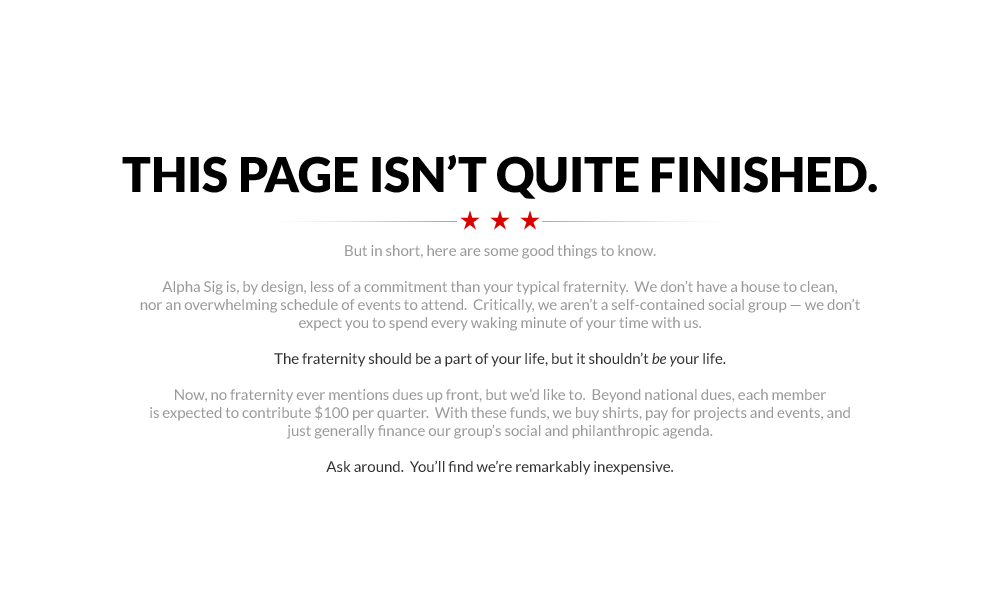
<style>
.page{position:relative;width:1000px;height:600px;background:#ffffff}
.page>*{position:absolute;margin:0}
.t1{font:15px/18px "Lato-Regular";color:#999999}
.t2{font:48px/36px "Lato-Black";color:#000000}
.t3{font:15px/18px "Lato-Regular";color:#333333}
.t4{font:15px/18px "Lato-Italic";color:#333333}
</style>
<div class="page">
<p class="t1" style="left:122px;top:154px;width:755px;height:321px;text-align:center"><span class="t2">THIS PAGE ISN’T QUITE FINISHED.<br><br></span><br><br>But in short, here are some good things to know.<br><br>Alpha Sig is, by design, less of a commitment than your typical fraternity.  We don’t have a house to clean,<br>nor an overwhelming schedule of events to attend.  Critically, we aren’t a self-contained social group — we don’t<br>expect you to spend every waking minute of your time with us.<br><br><span class="t3">The fraternity should be a part of your life, but it shouldn’t </span><span class="t4">be y</span><span class="t3">our life.<br></span><br>Now, no fraternity ever mentions dues up front, but we’d like to.  Beyond national dues, each member<br>is expected to contribute $100 per quarter.  With these funds, we buy shirts, pay for projects and events, and<br>just generally finance our group’s social and philanthropic agenda.<br><br><span class="t3">Ask around.  You’ll find we’re remarkably inexpensive.</span></p>
</div>
